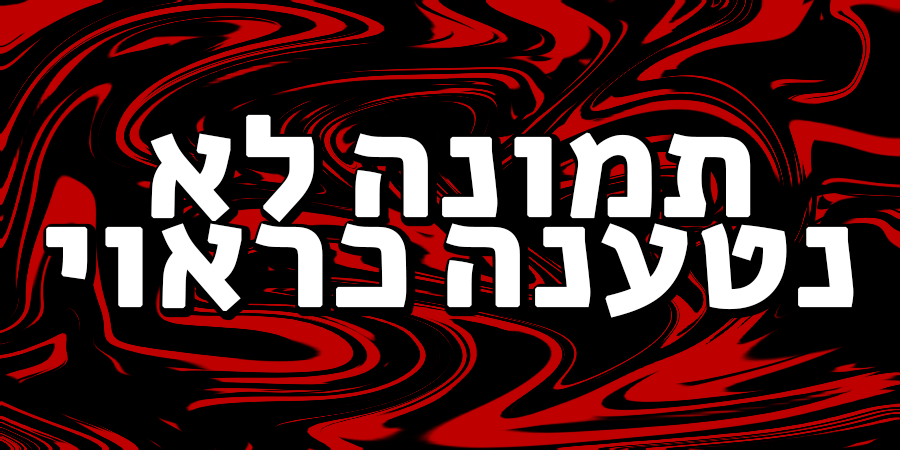
<style>
.page{position:relative;width:900px;height:450px;background:#000000}
.page>*{position:absolute;margin:0}
.t1{font:150px/90px "Alef-Bold";color:#ffffff;font-weight:bold}
</style>
<div class="page">
<p class="t1" style="left:46px;top:114px;width:808px;height:204px;text-align:center">תמונה לא<br>נטענה כראוי</p>
</div>
